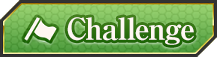
<style>
.page{position:relative;width:217px;height:57px}
.page>*{position:absolute;margin:0}
.t1{font:30px "RyuminPro-ExBold";letter-spacing:-0.04em;color:#fff7f3}
</style>
<div class="page">
<p class="t1" style="left:67px;top:17px;width:127px;height:28px">Challenge</p>
</div>
